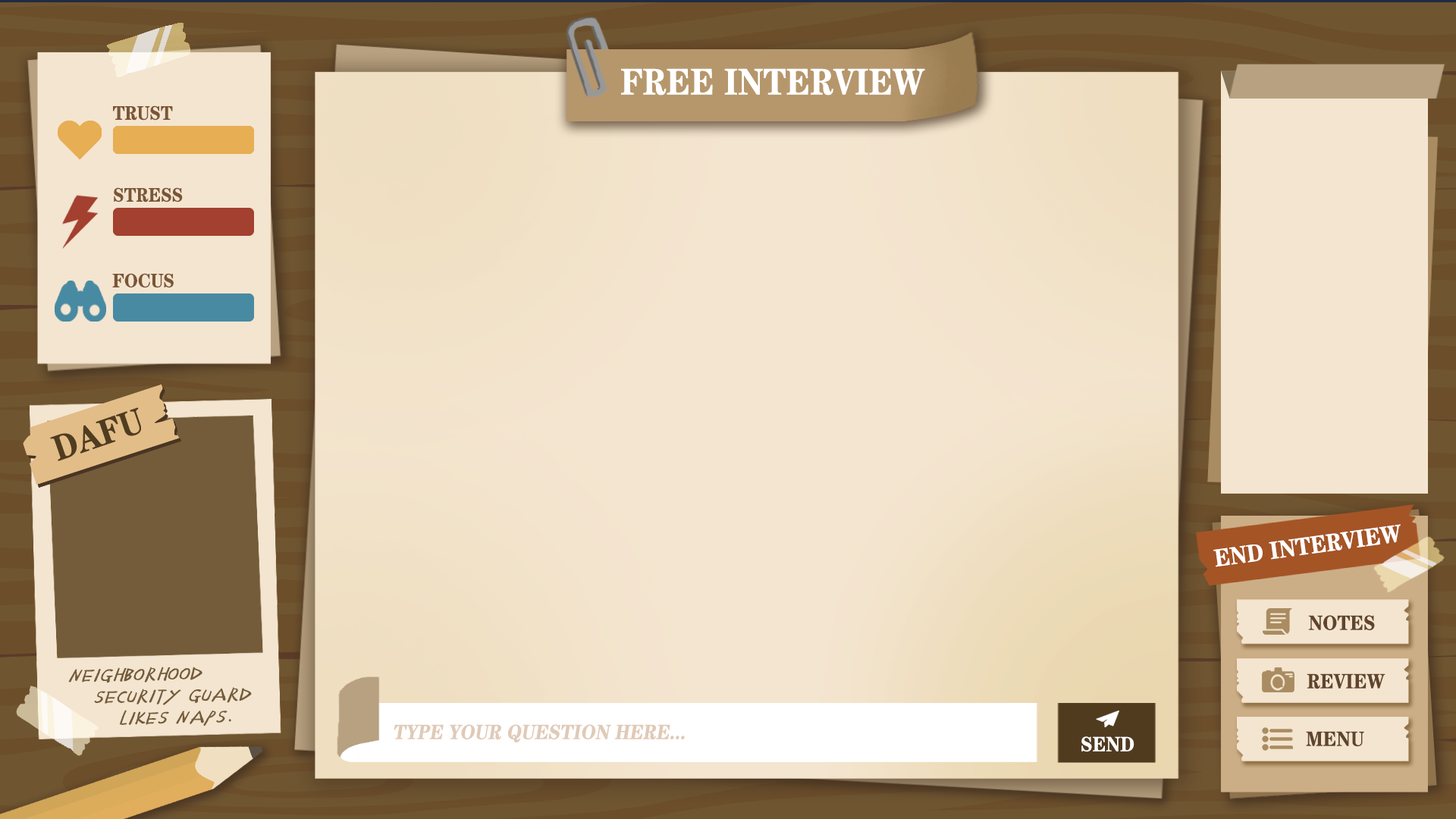
<style>
.page{position:relative;width:1456px;height:819px;background:#f4e5d0}
.page>*{position:absolute;margin:0}
.t1{font:37.1px "FZCHSJW--GB1-0";color:#ffffff;text-transform:uppercase;scale:0.9 1}
.t2{font:19.5px "FZCHSJW--GB1-0";color:#7a5637;text-transform:uppercase;scale:0.9 1}
.t3{font:24.6px "FZCHSJW--GB1-0";color:#ffffff;text-transform:uppercase;scale:0.9 1}
.t4{font:20.8px "FZCHSJW--GB1-0";color:#60442d;text-transform:uppercase;scale:0.9 1}
.t5{font:20.8px "FZCHSJW--GB1-0";color:#e0cab7;text-transform:uppercase;font-style:italic;scale:0.9 1}
.t6{font:20.8px "FZCHSJW--GB1-0";color:#ffffff;text-transform:uppercase;scale:0.9 1}
</style>
<div class="page">
<p class="t1" style="left:621px;top:68px;width:304px;height:28px">free INTERVIEW</p>
<p class="t2" style="left:113px;top:105px;width:60px;height:16px">Trust</p>
<p class="t2" style="left:114px;top:187px;width:69px;height:15px">stress</p>
<p class="t2" style="left:112px;top:273px;width:62px;height:15px">focus</p>
<p class="t3" style="left:1213px;top:524px;width:188px;height:43px;rotate:-8deg">end interview</p>
<p class="t4" style="left:1308px;top:615px;width:67px;height:16px">notes</p>
<p class="t4" style="left:1307px;top:673px;width:78px;height:16px">review</p>
<p class="t5" style="left:394px;top:724px;width:291px;height:18px">Type your question here...</p>
<p class="t6" style="left:1081px;top:736px;width:53px;height:16px">send</p>
<p class="t4" style="left:1306px;top:731px;width:58px;height:16px">menu</p>
</div>
